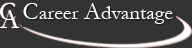
<style>
.page{position:relative;width:192px;height:48px;background:#333333}
.page>*{position:absolute;margin:0}
.t1{font:27px "Garamond";color:#ffffff}
.t2{font:20.9px "Garamond";color:#ffffff}
.t3{font:25.4px "Garamond";color:#ffffff}
.t4{font:29.3px "Garamond";color:#ffffff}
</style>
<div class="page">
<p class="t1" style="left:0px;top:3px;width:16px;height:17px">C</p>
<p class="t2" style="left:23px;top:3px;width:150px;height:21px"><span class="t3">C</span>areer <span class="t3">A</span>dvantage</p>
<p class="t4" style="left:0px;top:10px;width:20px;height:18px">A</p>
</div>
